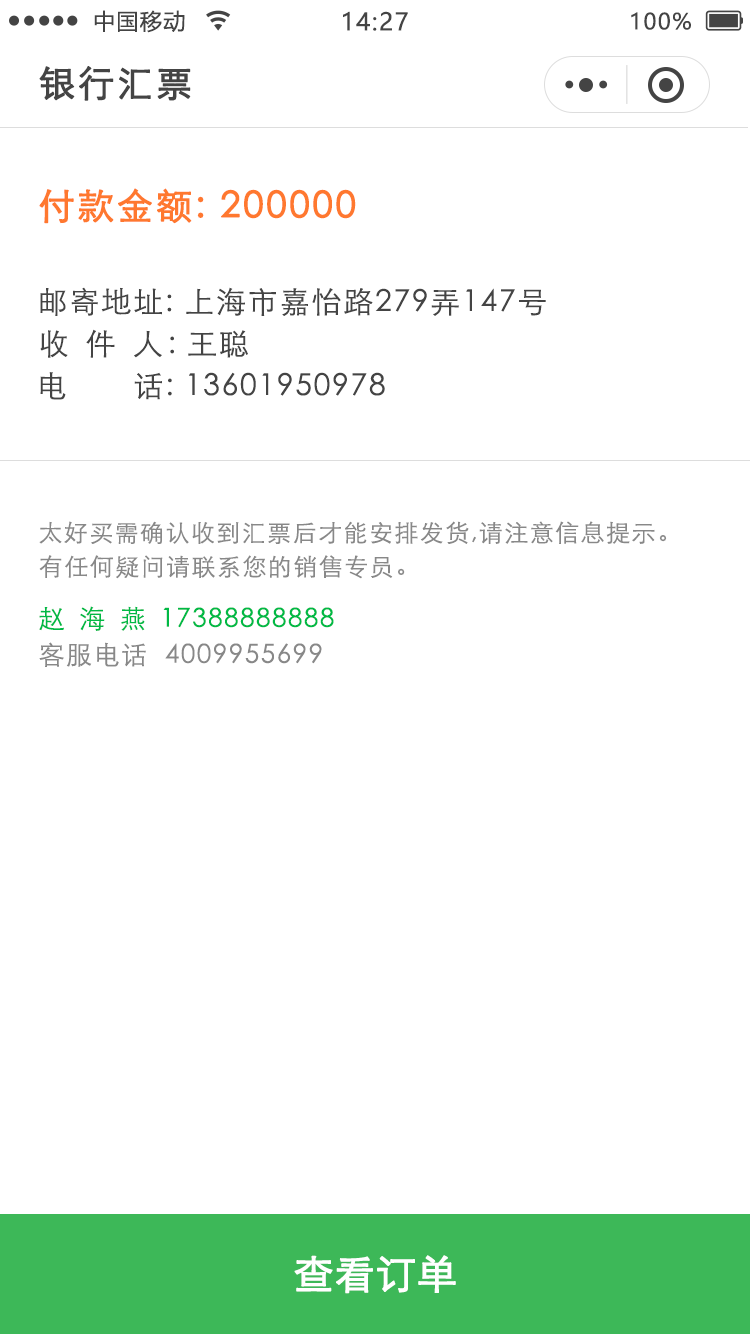
<style>
.page{position:relative;width:750px;height:1334px;background:#ffffff}
.page>*{position:absolute;margin:0}
.t1{font:22px "MicrosoftYaHei";letter-spacing:0.06em;color:#444444}
.t2{font:24px "MicrosoftYaHei";letter-spacing:0.06em;color:#444444}
.t3{font:36px "STXihei";letter-spacing:0.06em;color:#444444;font-weight:bold}
.t4{font:36px "STXihei";letter-spacing:0.06em;color:#ff782f;font-weight:bold}
.t5{font:30px "STXihei";letter-spacing:0.06em;color:#444444}
.t6{font:30px "STXihei";letter-spacing:0.16em;color:#444444}
.t7{font:24px "STXihei";letter-spacing:0.06em;color:#888888}
.t8{font:26px "STXihei";letter-spacing:0.06em;color:#00b945}
.t9{font:26px "STXihei";letter-spacing:0.56em;color:#00b945}
.t10{font:26px "STXihei";letter-spacing:0.06em;color:#888888}
.t11{font:40px "STXihei";color:#ffffff;font-weight:bold}
</style>
<div class="page">
<p class="t1" style="left:94px;top:10px;width:91px;height:23px">中国移动</p>
<p class="t2" style="left:343px;top:11px;width:65px;height:20px">14:27</p>
<p class="t1" style="left:631px;top:12px;width:60px;height:18px">100%</p>
<p class="t3" style="left:39px;top:66px;width:152px;height:35px">银行汇票</p>
<p class="t4" style="left:39px;top:188px;width:317px;height:36px">付款金额: 200000</p>
<p class="t5" style="left:40px;top:287px;width:506px;height:29px">邮寄地址: 上海市嘉怡路279弄147号</p>
<p class="t6" style="left:40px;top:329px;width:208px;height:29px">收 件 人<span class="t5">: 王聪</span></p>
<p class="t5" style="left:40px;top:372px;width:345px;height:28px">电       话: 13601950978</p>
<p class="t7" style="left:39px;top:521px;width:628px;height:23px">太好买需确认收到汇票后才能安排发货,请注意信息提示。</p>
<p class="t7" style="left:39px;top:555px;width:366px;height:24px">有任何疑问请联系您的销售专员。</p>
<p class="t8" style="left:39px;top:606px;width:295px;height:25px"><span class="t9">赵海燕</span>17388888888</p>
<p class="t10" style="left:39px;top:642px;width:283px;height:25px">客服电话  4009955699</p>
<p class="t11" style="left:294px;top:1255px;width:162px;height:39px">查看订单</p>
</div>
